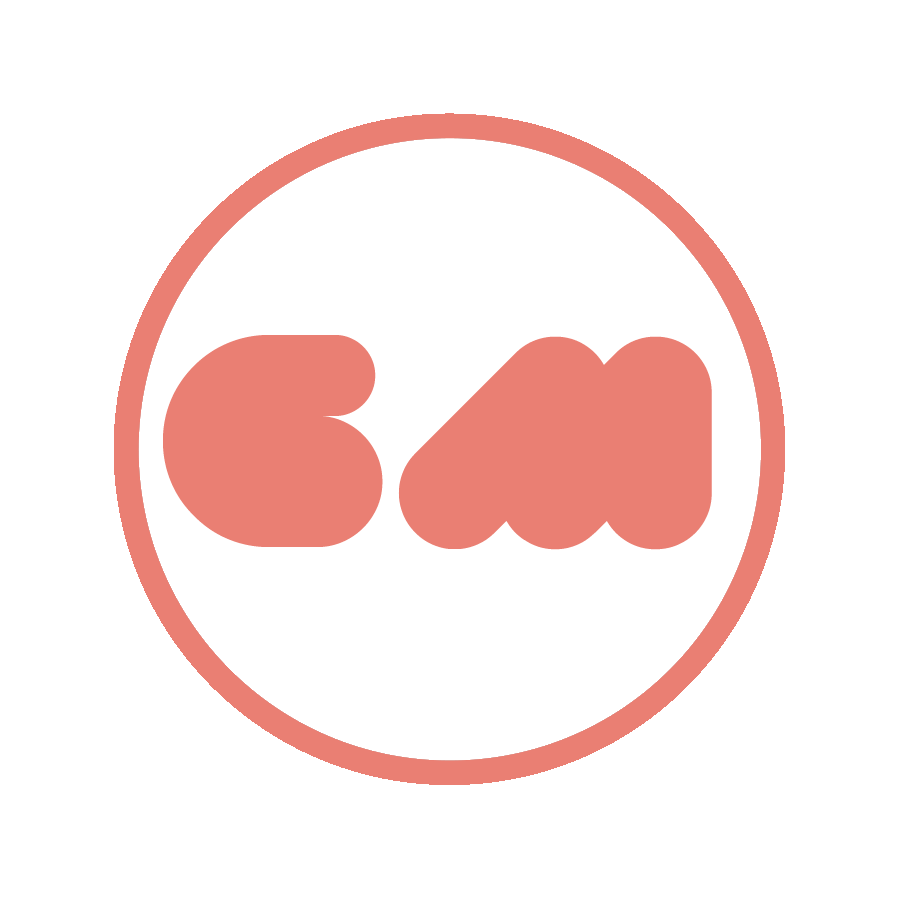
<style>
.page{position:relative;width:899px;height:898px;background:#ffffff}
.page>*{position:absolute;margin:0}
.t1{font:300px "DISKOPIA2.0-Black";color:#ea7f73}
</style>
<div class="page">
<p class="t1" style="left:163px;top:335px;width:549px;height:215px">GMm</p>
</div>
